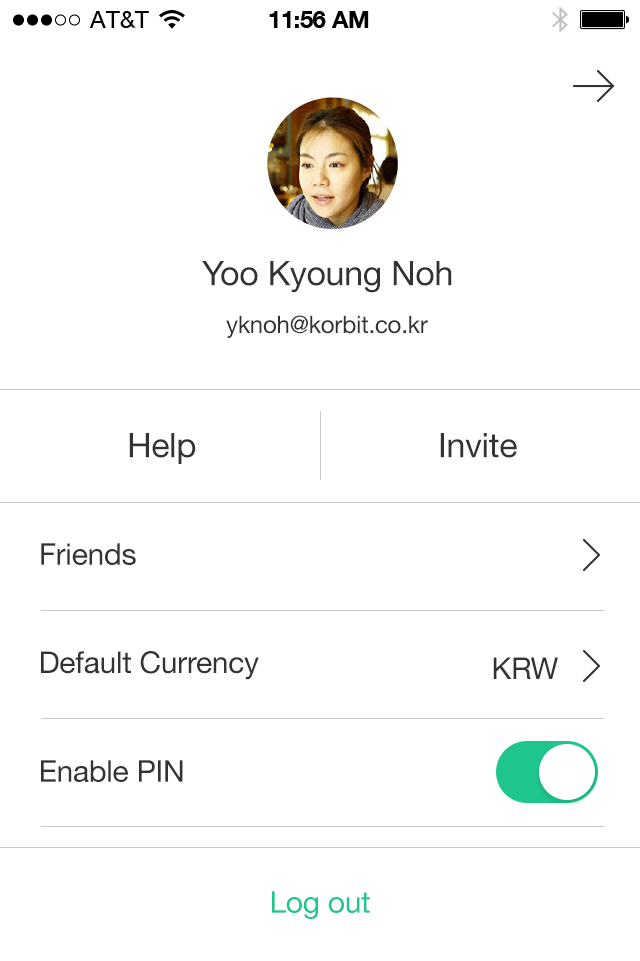
<style>
.page{position:relative;width:640px;height:961px;background:#ffffff}
.page>*{position:absolute;margin:0}
.t1{font:34px "HelveticaNeue";letter-spacing:-0.01em;color:#333333}
.t2{font:24px "HelveticaNeue";letter-spacing:-0.01em;color:#333333}
.t3{font:30px "HelveticaNeue";letter-spacing:-0.01em;color:#333333}
.t4{font:30px "HelveticaNeue";letter-spacing:-0.01em;color:#1ec68e}
</style>
<div class="page">
<p class="t1" style="left:202px;top:261px;width:250px;height:32px">Yoo Kyoung Noh</p>
<p class="t2" style="left:226px;top:315px;width:202px;height:23px">yknoh@korbit.co.kr</p>
<p class="t1" style="left:129px;top:433px;width:67px;height:31px">Help</p>
<p class="t1" style="left:440px;top:433px;width:77px;height:25px">Invite</p>
<p class="t3" style="left:41px;top:543px;width:95px;height:22px">Friends</p>
<p class="t3" style="left:41px;top:651px;width:218px;height:29px">Default Currency</p>
<p class="t3" style="left:493px;top:657px;width:65px;height:22px">KRW</p>
<p class="t3" style="left:41px;top:760px;width:142px;height:22px">Enable PIN</p>
<p class="t4" style="left:272px;top:891px;width:98px;height:28px">Log out</p>
</div>
